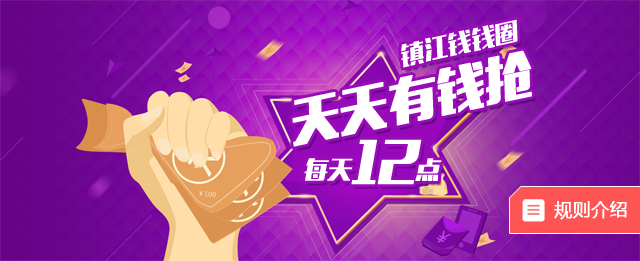
<style>
.page{position:relative;width:640px;height:261px}
.page>*{position:absolute;margin:0}
.t1{font:24px "MFLiHei_Noncommercial-Regular";color:#ffffff;font-style:italic}
.t2{font:48px "MFLiHei_Noncommercial-Regular";color:#ffffff;font-weight:bold;font-style:italic}
.t3{font:18px "MicrosoftYaHei";color:#ffffff;font-weight:bold}
</style>
<div class="page">
<p class="t1" style="left:401px;top:19px;width:117px;height:49px;rotate:-13deg">镇江钱钱圈</p>
<p class="t2" style="left:292px;top:50px;width:240px;height:97px;rotate:-12deg">天天有钱抢</p>
<p class="t1" style="left:304px;top:139px;width:138px;height:46px">每天<span class="t2">12</span>点</p>
<p class="t3" style="left:554px;top:201px;width:73px;height:19px">规则介绍</p>
</div>
